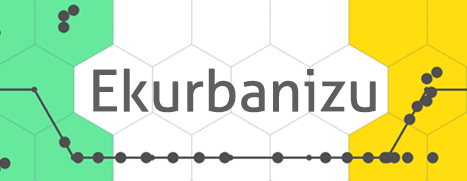
<style>
.page{position:relative;width:467px;height:181px;background:#ffffff}
.page>*{position:absolute;margin:0}
.t1{font:58.2px "Aller";color:#5e5e5e}
</style>
<div class="page">
<p class="t1" style="left:93px;top:68px;width:283px;height:45px">Ekurbanizu</p>
</div>
